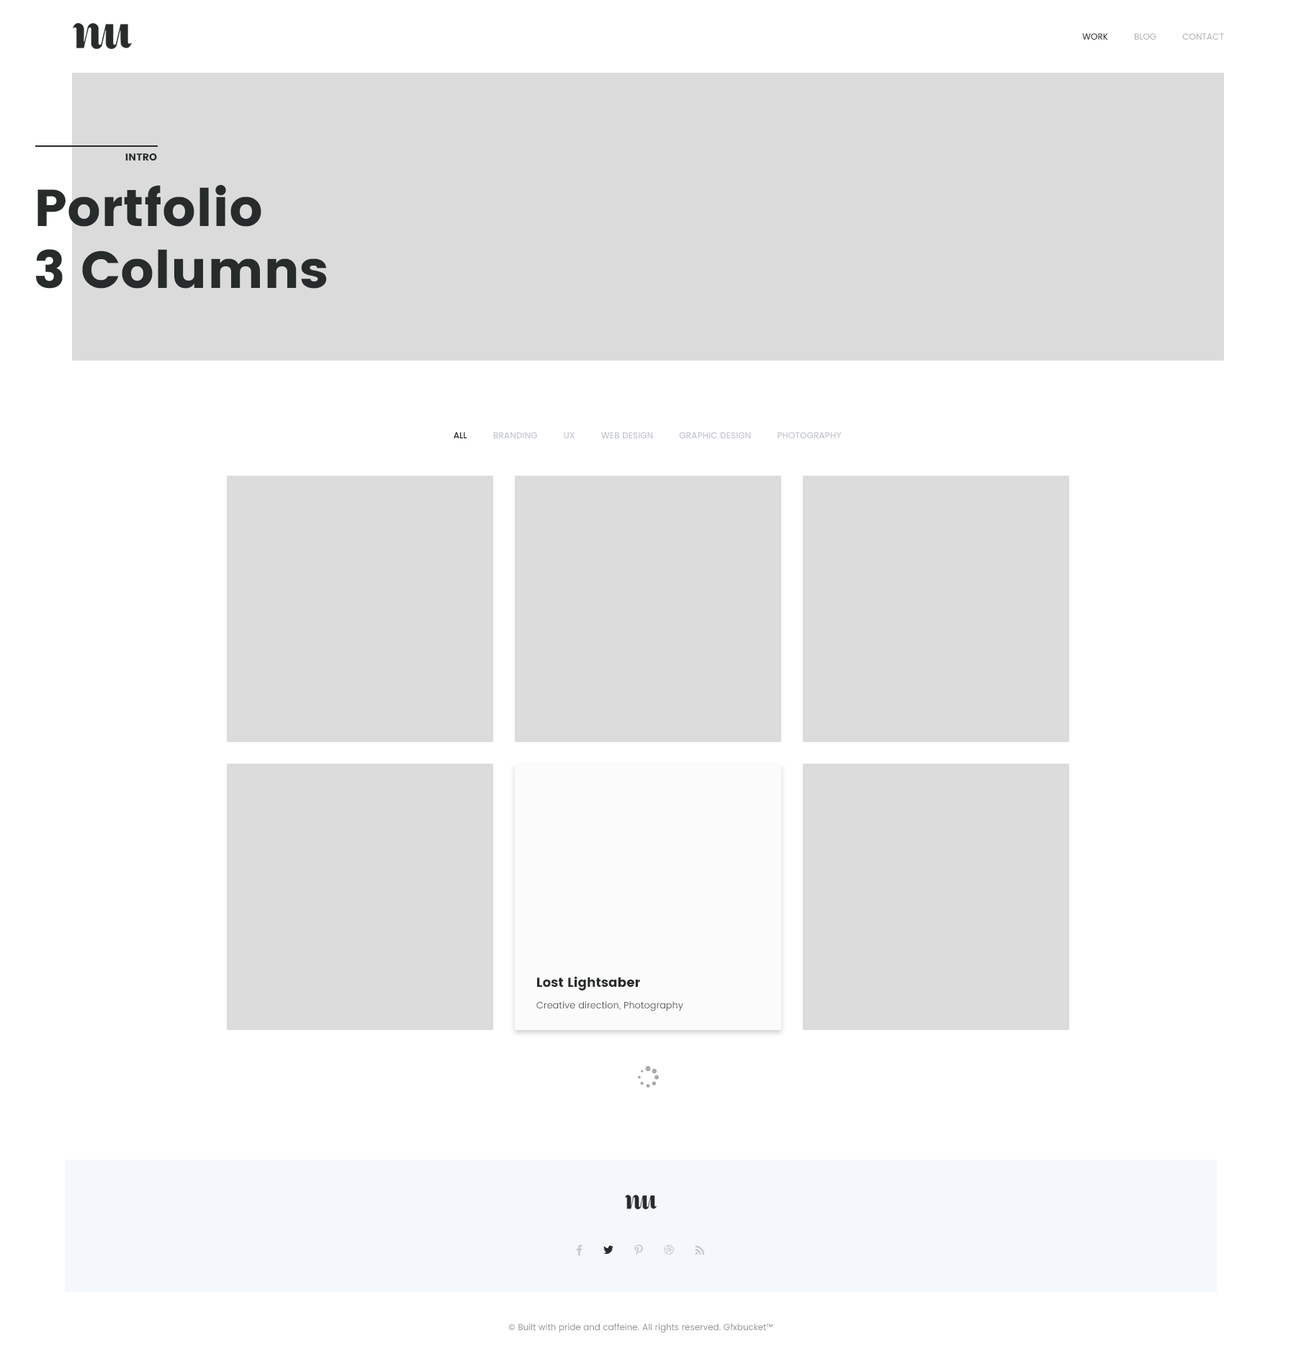
<style>
.page{position:relative;width:1296px;height:1364px;background:#ffffff}
.page>*{position:absolute;margin:0}
.t1{font:8.6px "Poppins-Regular";color:#abaeaf;text-transform:uppercase}
.t2{font:8.6px "Poppins-Regular";color:#272b2b;text-transform:uppercase}
.t3{font:10.1px "Poppins";color:#272b2b;text-transform:uppercase}
.t4{font:51.8px "Poppins";color:#272b2b}
.t5{font:8.6px "Poppins-Medium";color:#c2c6cd;text-transform:uppercase}
.t6{font:8.6px "Poppins-Medium";color:#272b2b;text-transform:uppercase}
.t7{font:9.4px/21.6px "Poppins-Regular";color:#676a6a}
.t8{font:13px/21.6px "Poppins";color:#272b2b}
.t9{font:8.6px "Poppins-Regular";color:#949696}
</style>
<div class="page">
<p class="t1" style="left:1082px;top:33px;width:142px;height:7px"><span class="t2">         work  </span>        Blog          contact</p>
<p class="t3" style="left:125px;top:153px;width:32px;height:8px">Intro</p>
<p class="t4" style="left:36px;top:185px;width:291px;height:104px">Portfolio<br>3 Columns</p>
<p class="t5" style="left:454px;top:432px;width:388px;height:6px"><span class="t6">All         </span> Branding          UX          WEB DESIGN          GRAPHIC DESIGN          PHOTOGRAPHY</p>
<p class="t7" style="left:536px;top:976px;width:147px;height:36px"><span class="t8">Lost Lightsaber<br></span>Creative direction, Photography</p>
<p class="t9" style="left:508px;top:1323px;width:265px;height:10px">© Built with pride and caffeine. All rights reserved. Gfxbucket™</p>
</div>
